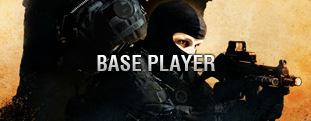
<style>
.page{position:relative;width:311px;height:121px}
.page>*{position:absolute;margin:0}
.t1{font:21px "Helvetica-Condensed-Bold"}
</style>
<div class="page">
<p class="t1" style="left:97px;top:55px;width:118px;height:16px">BASE PLAYER</p>
</div>
